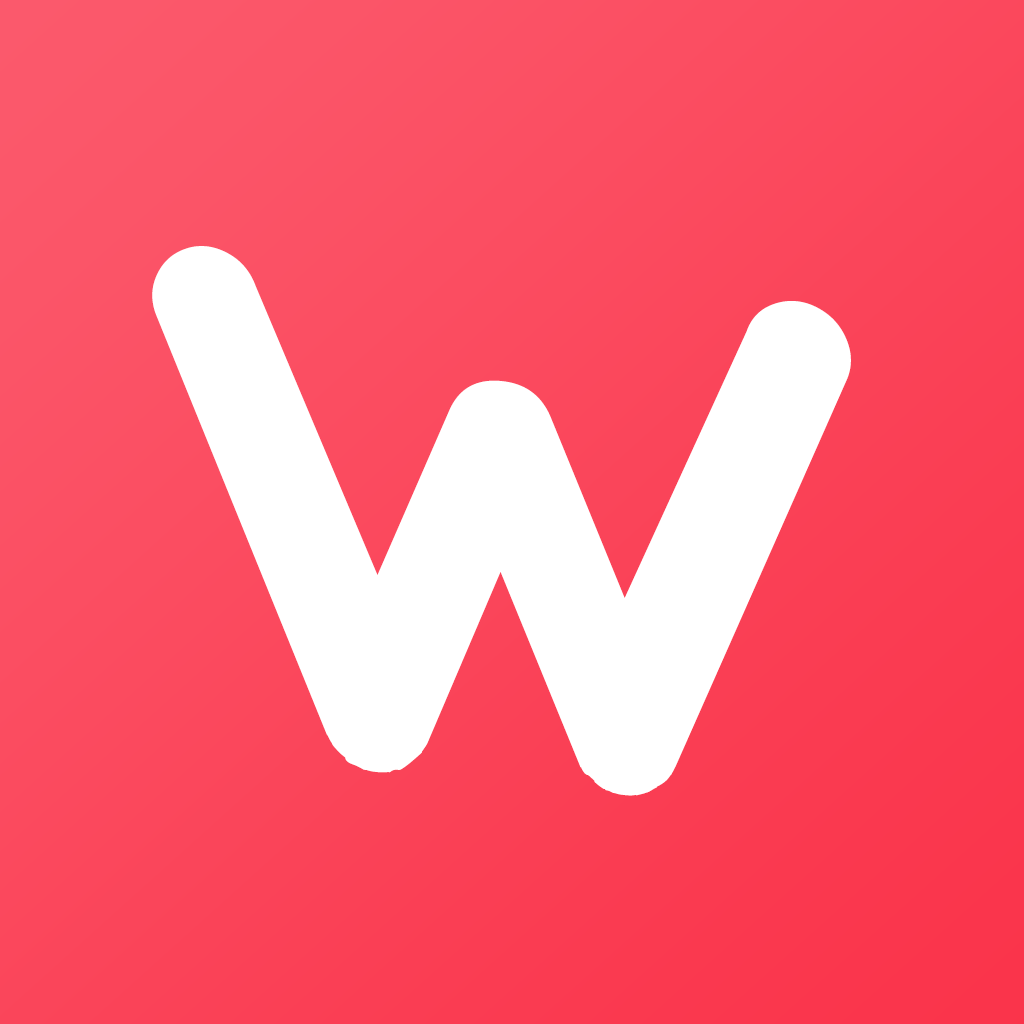
<style>
.page{position:relative;width:1024px;height:1024px}
.page>*{position:absolute;margin:0}
.t1{font:1034.2px "Quicksand-Bold";color:#ffffff}
</style>
<div class="page">
<p class="t1" style="left:152px;top:246px;width:699px;height:550px;rotate:5deg">w</p>
</div>
